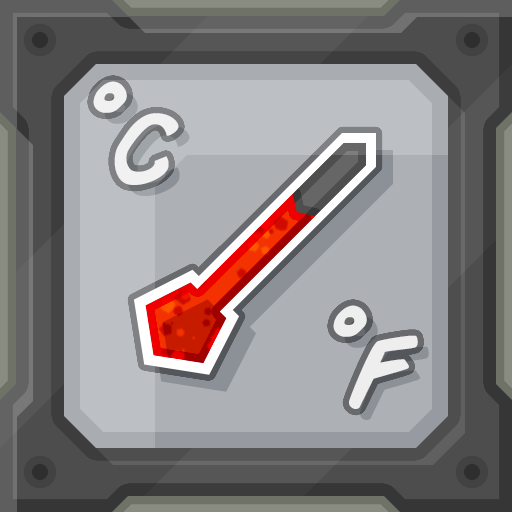
<style>
.page{position:relative;width:512px;height:512px}
.page>*{position:absolute;margin:0}
.t1{font:96.2px "ComicBook-Italic";letter-spacing:-0.04em;color:#eeeeee}
</style>
<div class="page">
<p class="t1" style="left:93px;top:81px;width:86px;height:104px">°C</p>
<p class="t1" style="left:333px;top:305px;width:85px;height:104px">°F</p>
</div>
